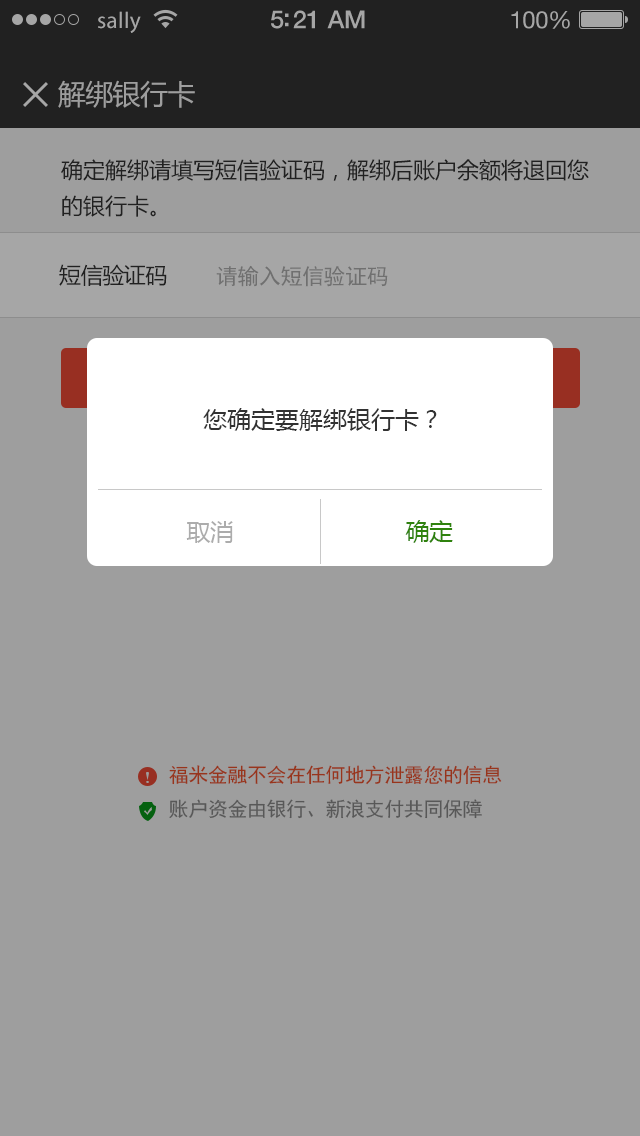
<style>
.page{position:relative;width:640px;height:1136px;background:#9e9e9e}
.page>*{position:absolute;margin:0}
.t1{font:23px "MyriadPro-Regular";letter-spacing:0.02em;color:#a6a6a6}
.t2{font:25px "HelveticaNeue-Medium";letter-spacing:-0.02em;color:#a6a6a6}
.t3{font:24px "HelveticaNeue";letter-spacing:-0.02em;color:#a6a6a6}
.t4{font:28px "MicrosoftYaHei";letter-spacing:-0.02em;color:#9e9e9e}
.t5{font:22px/36px "MicrosoftYaHei";color:#323232}
.t6{font:22px "MicrosoftYaHei";letter-spacing:-0.02em;color:#323232}
.t7{font:22px "SimHei";letter-spacing:-0.02em;color:#707070}
.t8{font:24px "MicrosoftYaHei";color:#323232}
.t9{font:24px "MicrosoftYaHei";letter-spacing:-0.02em;color:#acacac}
.t10{font:24px "MicrosoftYaHei";letter-spacing:-0.02em;color:#2f820e}
.t11{font:20px "SimHei";letter-spacing:-0.02em;color:#98351c}
.t12{font:20px "SimHei";letter-spacing:-0.02em;color:#585858}
</style>
<div class="page">
<p class="t1" style="left:98px;top:11px;width:43px;height:22px">sally</p>
<p class="t2" style="left:271px;top:10px;width:94px;height:19px">5:21 AM</p>
<p class="t3" style="left:511px;top:11px;width:59px;height:18px">100%</p>
<p class="t4" style="left:58px;top:80px;width:137px;height:28px">解绑银行卡</p>
<p class="t5" style="left:61px;top:159px;width:528px;height:58px">确定解绑请填写短信验证码，解绑后账户余额将退回您的银行卡。</p>
<p class="t6" style="left:59px;top:264px;width:108px;height:22px">短信验证码</p>
<p class="t7" style="left:216px;top:265px;width:172px;height:22px">请输入短信验证码</p>
<p class="t8" style="left:203px;top:408px;width:234px;height:23px">您确定要解绑银行卡？</p>
<p class="t9" style="left:186px;top:521px;width:47px;height:22px">取消</p>
<p class="t10" style="left:405px;top:520px;width:48px;height:23px">确定</p>
<p class="t11" style="left:169px;top:765px;width:333px;height:20px">福米金融不会在任何地方泄露您的信息</p>
<p class="t12" style="left:169px;top:799px;width:313px;height:20px">账户资金由银行、新浪支付共同保障</p>
</div>
